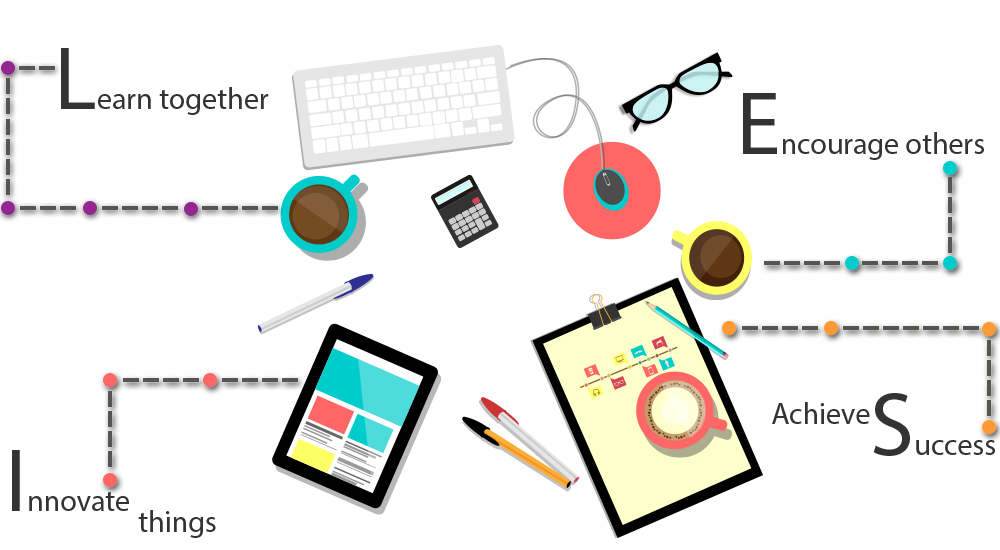
<style>
.page{position:relative;width:1000px;height:550px;background:#ffffff}
.page>*{position:absolute;margin:0}
.t1{font:30px "MyriadPro-Regular";color:#333333}
.t2{font:90px "MyriadPro-Regular";color:#333333}
.t3{font:90.3px "MyriadPro-Regular";color:#333333}
</style>
<div class="page">
<p class="t1" style="left:61px;top:48px;width:208px;height:67px"><span class="t2">L</span>earn together</p>
<p class="t1" style="left:743px;top:93px;width:241px;height:67px"><span class="t3">E</span>ncourage others</p>
<p class="t1" style="left:873px;top:393px;width:122px;height:63px"><span class="t2">S</span>uccess</p>
<p class="t1" style="left:772px;top:402px;width:98px;height:22px">Achieve</p>
<p class="t1" style="left:12px;top:450px;width:117px;height:61px"><span class="t2">I</span>nnovate</p>
<p class="t1" style="left:138px;top:510px;width:78px;height:28px">things</p>
</div>
